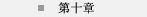
<style>
.page{position:relative;width:147px;height:17px;background:#f1f1f1}
.page>*{position:absolute;margin:0}
.t1{font:12px "SimSun";color:#000000;font-weight:bold}
</style>
<div class="page">
<p class="t1" style="left:38px;top:0px;width:77px;height:17px">第十章</p>
</div>
